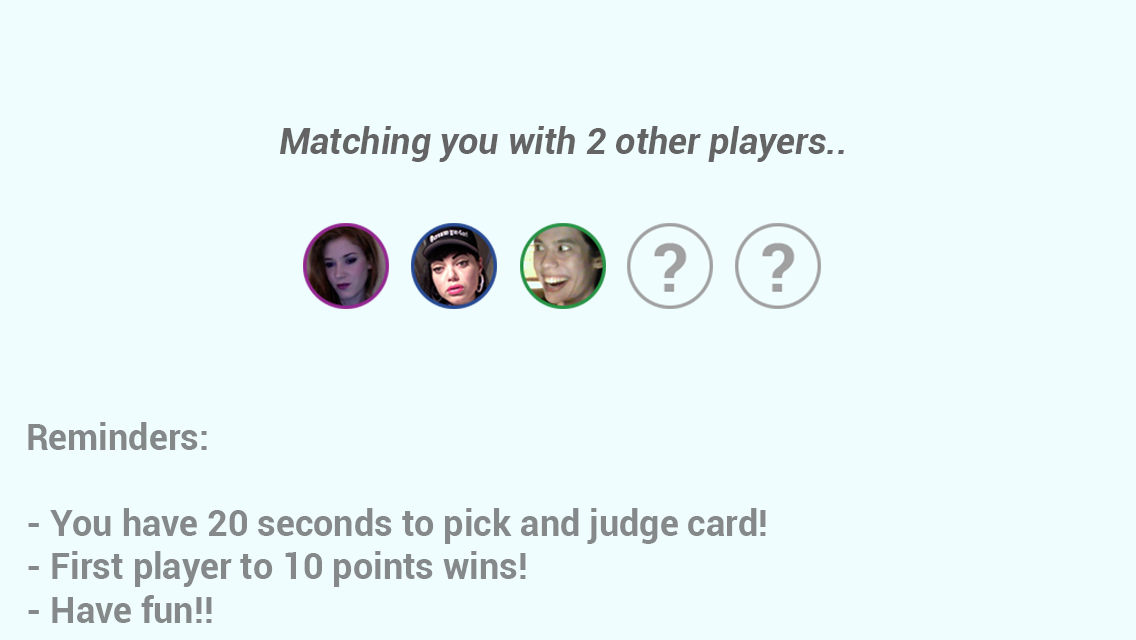
<style>
.page{position:relative;width:1136px;height:640px;background:#f0fdff}
.page>*{position:absolute;margin:0}
.t1{font:36px "Roboto-BoldItalic";color:#646464}
.t2{font:36px "Roboto-Bold";color:#86898a}
.t3{font:36px "Roboto-Bold";color:#858888}
</style>
<div class="page">
<p class="t1" style="left:280px;top:126px;width:564px;height:36px">Matching you with 2 other players..</p>
<p class="t2" style="left:28px;top:422px;width:738px;height:201px"><span class="t3">Reminders:<br></span><br>- You have 20 seconds to pick and judge card!<br>- First player to 10 points wins!<br>- Have fun!!</p>
</div>
